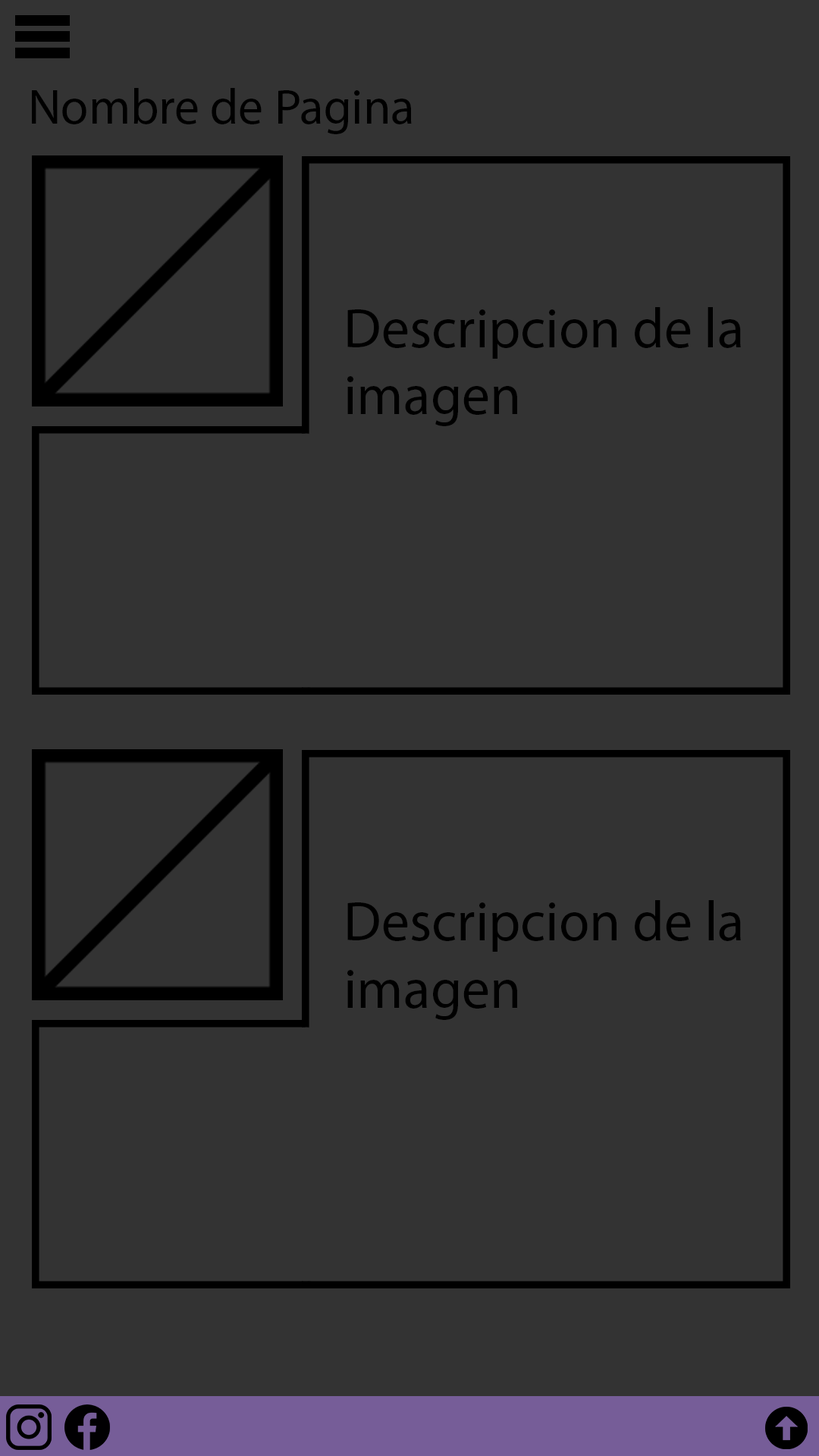
<style>
.page{position:relative;width:819px;height:1456px;background:#333333}
.page>*{position:absolute;margin:0}
.t1{font:50px "MyriadPro-Regular";color:#000000}
.t2{font:56.1px "MyriadPro-Regular";color:#000000}
</style>
<div class="page">
<p class="t1" style="left:32px;top:88px;width:380px;height:46px">Nombre de Pagina</p>
<p class="t2" style="left:347px;top:307px;width:394px;height:119px">Descripcion de la <br>imagen</p>
<p class="t2" style="left:347px;top:900px;width:394px;height:120px">Descripcion de la <br>imagen</p>
</div>
